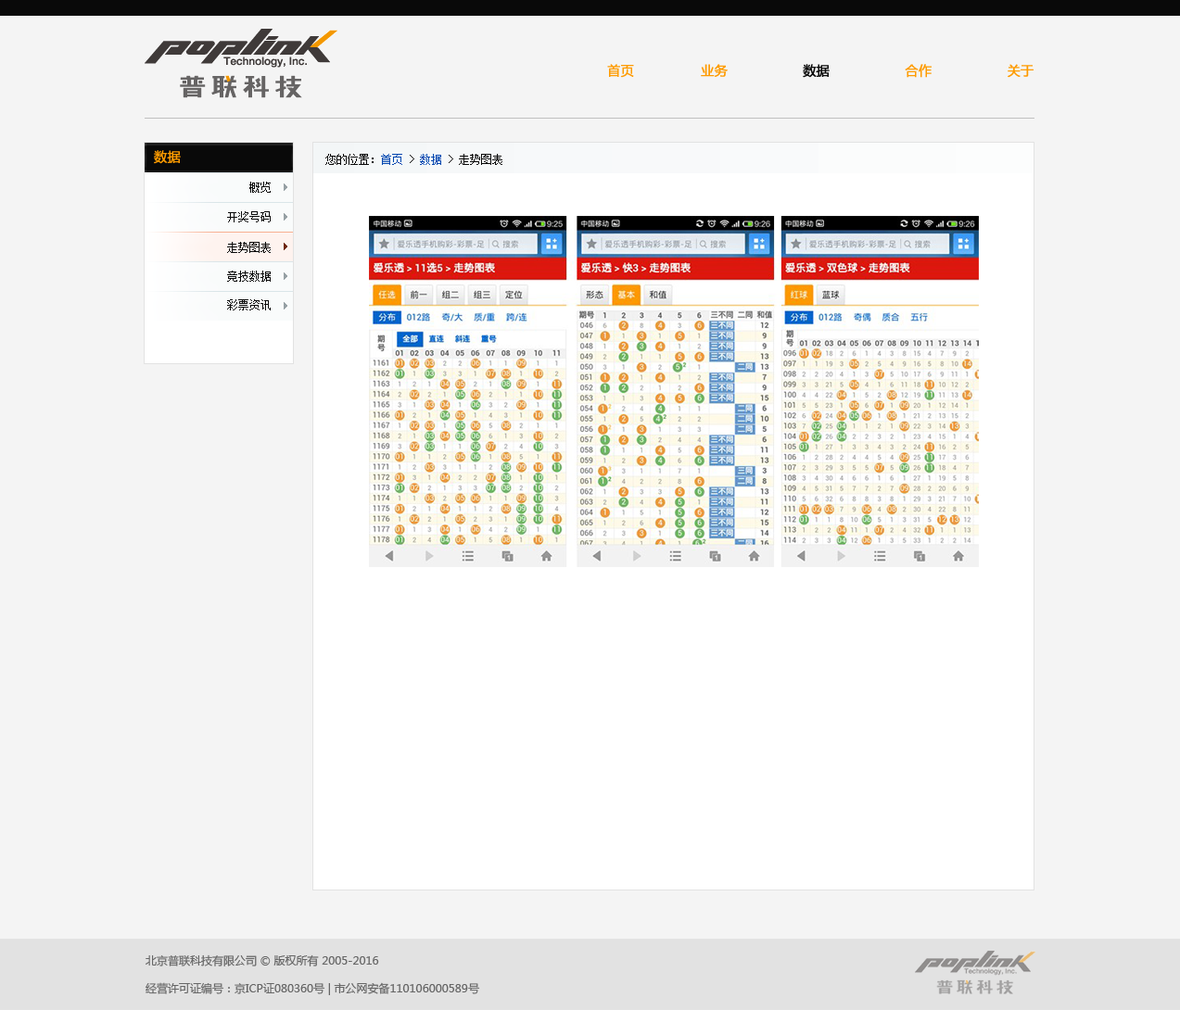
<style>
.page{position:relative;width:1180px;height:1010px;background:#f4f4f4}
.page>*{position:absolute;margin:0}
.t1{font:13px "MicrosoftYaHei";color:#fe9b00;text-transform:uppercase;font-weight:bold}
.t2{font:13px "MicrosoftYaHei";color:#090909;text-transform:uppercase;font-weight:bold}
.t3{font:13px "MicrosoftYaHei";color:#fe9b00;font-weight:bold}
.t4{font:11.1px "SimSun";color:#090909;text-transform:uppercase}
.t5{font:11.1px "SimSun";color:#0146af;text-transform:uppercase}
.t6{font:11.1px/27.8px "MicrosoftYaHei";color:#666666}
</style>
<div class="page">
<p class="t1" style="left:607px;top:64px;width:427px;height:14px">首页                业务                  <span class="t2">数据</span>                  合作                  关于</p>
<p class="t3" style="left:154px;top:150px;width:27px;height:14px">数据</p>
<p class="t4" style="left:325px;top:154px;width:177px;height:11px">您的位置：<span class="t5">首页 </span>&gt; <span class="t5">数据</span> &gt; 走势图表</p>
<p class="t4" style="left:249px;top:182px;width:22px;height:11px">概览</p>
<p class="t4" style="left:227px;top:211px;width:44px;height:11px">开奖号码</p>
<p class="t4" style="left:227px;top:242px;width:44px;height:11px">走势图表</p>
<p class="t4" style="left:227px;top:271px;width:44px;height:11px">竞技数据</p>
<p class="t4" style="left:227px;top:299px;width:44px;height:12px">彩票资讯</p>
<p class="t6" style="left:146px;top:955px;width:334px;height:41px">北京普联科技有限公司 © 版权所有 2005-2016<br>经营许可证编号：京ICP证080360号 | 市公网安备110106000589号</p>
</div>
